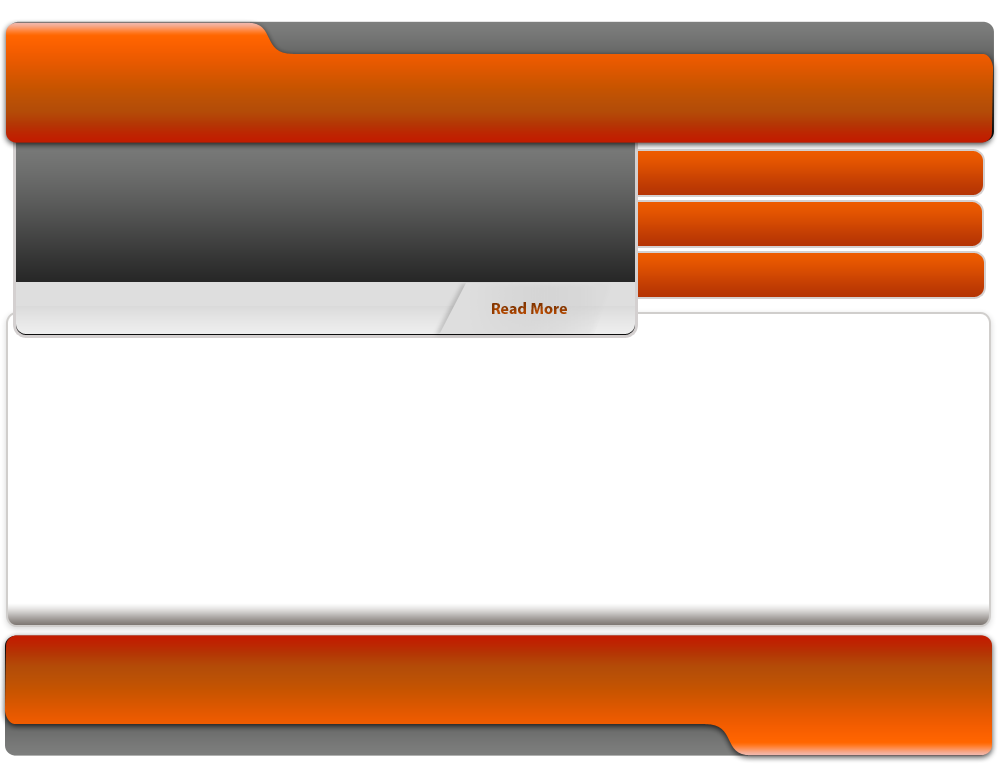
<style>
.page{position:relative;width:1000px;height:768px;background:#ffffff}
.page>*{position:absolute;margin:0}
.t1{font:16px "MyriadPro-Bold";color:#983e00}
</style>
<div class="page">
<p class="t1" style="left:492px;top:302px;width:75px;height:12px">Read More</p>
</div>
